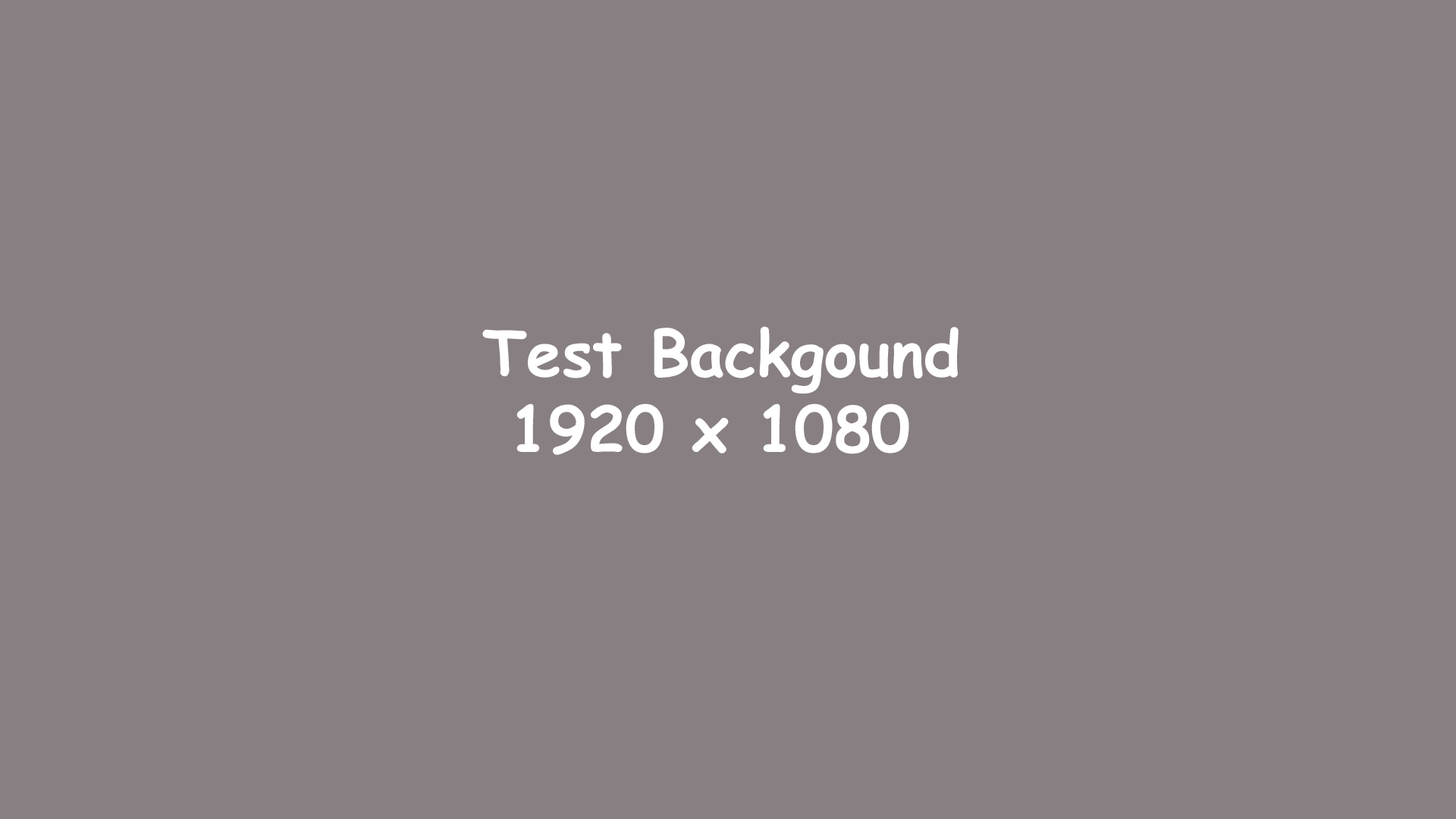
<style>
.page{position:relative;width:1456px;height:819px;background:#887f82}
.page>*{position:absolute;margin:0}
.t1{font:63.2px "ComicSansMS-Bold";color:#ffffff}
</style>
<div class="page">
<p class="t1" style="left:482px;top:326px;width:477px;height:129px">Test Backgound<br> 1920 x 1080</p>
</div>
